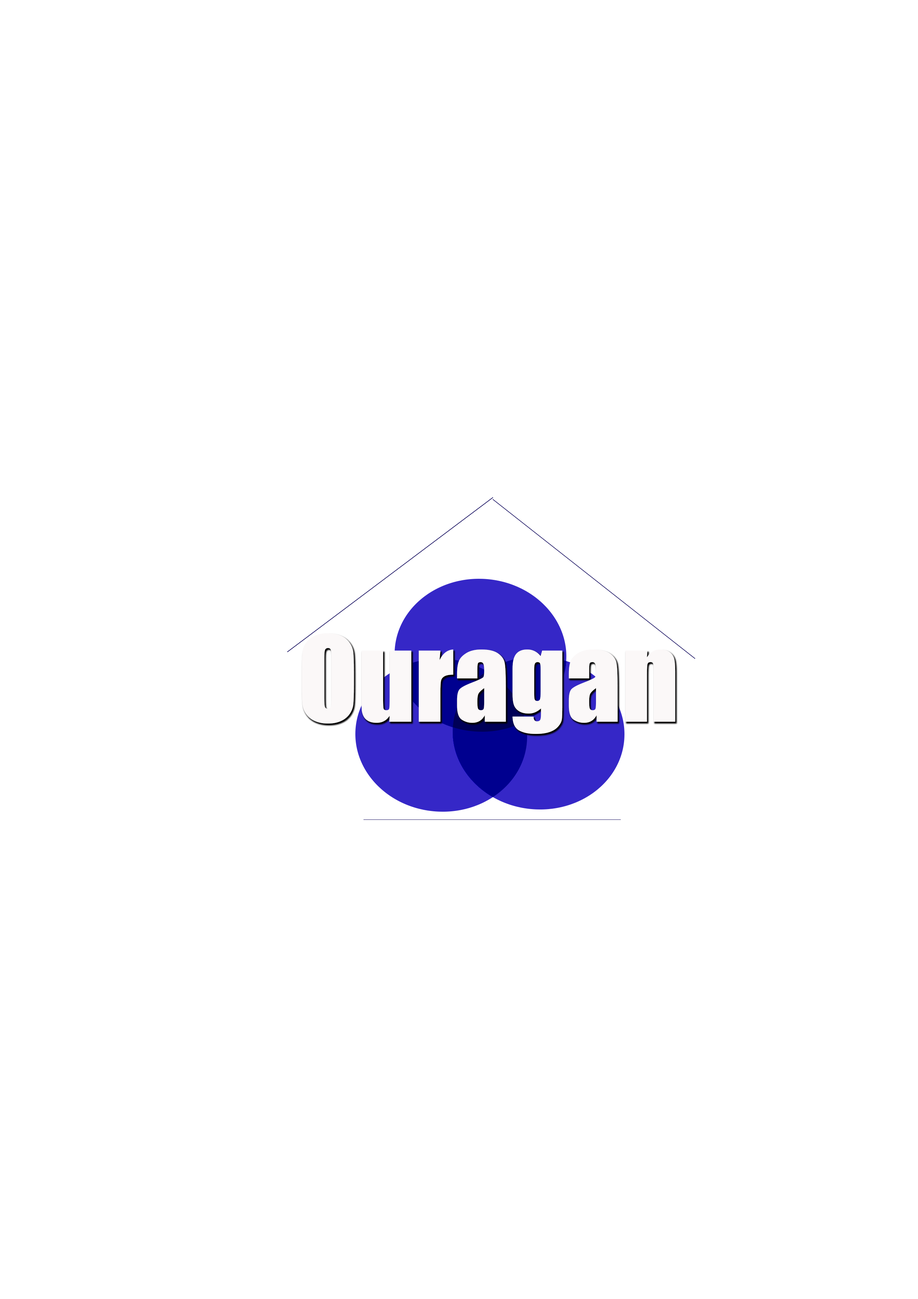
<style>
.page{position:relative;width:918px;height:1299px;background:#ffffff}
.page>*{position:absolute;margin:0}
.t1{font:109.5px "Impact";color:#fbf8f8}
</style>
<div class="page">
<p class="t1" style="left:302px;top:633px;width:374px;height:101px">Ouragan</p>
</div>
